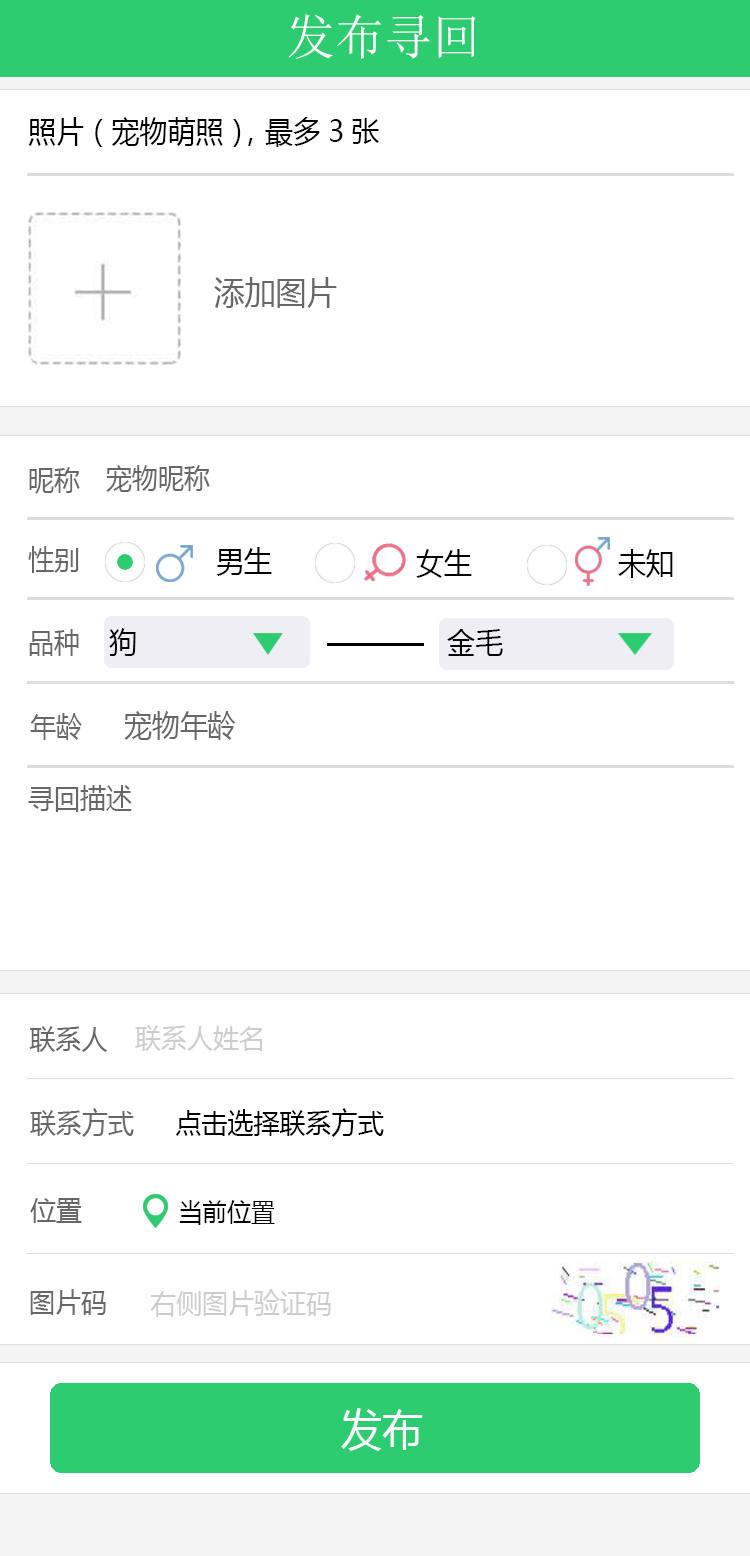
<style>
.page{position:relative;width:750px;height:1556px;background:#ffffff}
.page>*{position:absolute;margin:0}
.t1{font:48.7px "SimSun";color:#ffffff}
.t2{font:30px "MicrosoftYaHei";color:#000000;scale:0.93 1}
.t3{font:33px "MicrosoftYaHei";color:#676767;scale:0.93 1}
.t4{font:28px "MicrosoftYaHei";color:#676767;scale:0.93 1}
.t5{font:30px "MicrosoftYaHei";color:#000001;scale:0.93 1}
.t6{font:30px "MicrosoftYaHei";color:#676767;scale:0.93 1}
.t7{font:28px "MicrosoftYaHei";color:#cdcdcf;scale:0.93 1}
.t8{font:28px "MicrosoftYaHei";color:#000000;scale:0.93 1}
.t9{font:26px "MicrosoftYaHei";color:#000000;scale:0.93 1}
.t10{font:44px "MicrosoftYaHei";color:#ffffff;scale:0.93 1}
</style>
<div class="page">
<p class="t1" style="left:288px;top:14px;width:188px;height:45px">发布寻回</p>
<p class="t2" style="left:28px;top:117px;width:351px;height:30px">照片（宠物萌照），最多3张</p>
<p class="t3" style="left:214px;top:277px;width:123px;height:31px">添加图片</p>
<p class="t4" style="left:29px;top:467px;width:51px;height:27px">昵称</p>
<p class="t4" style="left:106px;top:465px;width:104px;height:27px">宠物昵称</p>
<p class="t4" style="left:28px;top:546px;width:51px;height:27px">性别</p>
<p class="t5" style="left:216px;top:547px;width:56px;height:29px">男生</p>
<p class="t2" style="left:416px;top:549px;width:56px;height:29px">女生</p>
<p class="t2" style="left:618px;top:549px;width:55px;height:29px">未知</p>
<p class="t4" style="left:29px;top:629px;width:50px;height:27px">品种</p>
<p class="t2" style="left:109px;top:628px;width:27px;height:28px">狗</p>
<p class="t2" style="left:447px;top:629px;width:56px;height:27px">金毛</p>
<p class="t4" style="left:30px;top:713px;width:52px;height:27px">年龄</p>
<p class="t6" style="left:124px;top:711px;width:112px;height:29px">宠物年龄</p>
<p class="t4" style="left:28px;top:785px;width:104px;height:27px">寻回描述</p>
<p class="t7" style="left:135px;top:1025px;width:127px;height:26px">联系人姓名</p>
<p class="t4" style="left:29px;top:1026px;width:79px;height:26px">联系人</p>
<p class="t4" style="left:30px;top:1108px;width:104px;height:29px">联系方式</p>
<p class="t8" style="left:176px;top:1108px;width:208px;height:29px">点击选择联系方式</p>
<p class="t4" style="left:30px;top:1198px;width:52px;height:25px">位置</p>
<p class="t9" style="left:179px;top:1200px;width:96px;height:25px">当前位置</p>
<p class="t4" style="left:30px;top:1289px;width:76px;height:26px">图片码</p>
<p class="t7" style="left:150px;top:1289px;width:181px;height:28px">右侧图片验证码</p>
<p class="t10" style="left:341px;top:1408px;width:82px;height:43px">发布</p>
</div>
